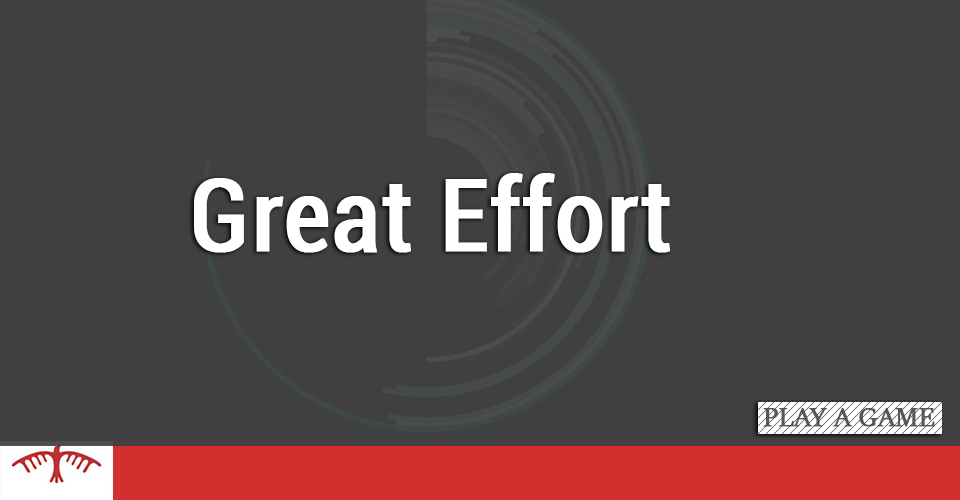
<style>
.page{position:relative;width:960px;height:500px;background:#404042}
.page>*{position:absolute;margin:0}
.t1{font:100px "Roboto-Condensed";color:#ffffff;font-weight:bold}
.t2{font:30px "SitkaBanner";color:#565656;font-weight:bold}
</style>
<div class="page">
<p class="t1" style="left:194px;top:173px;width:476px;height:80px">Great Effort</p>
<p class="t2" style="left:763px;top:408px;width:172px;height:19px">PLAY A GAME</p>
</div>
